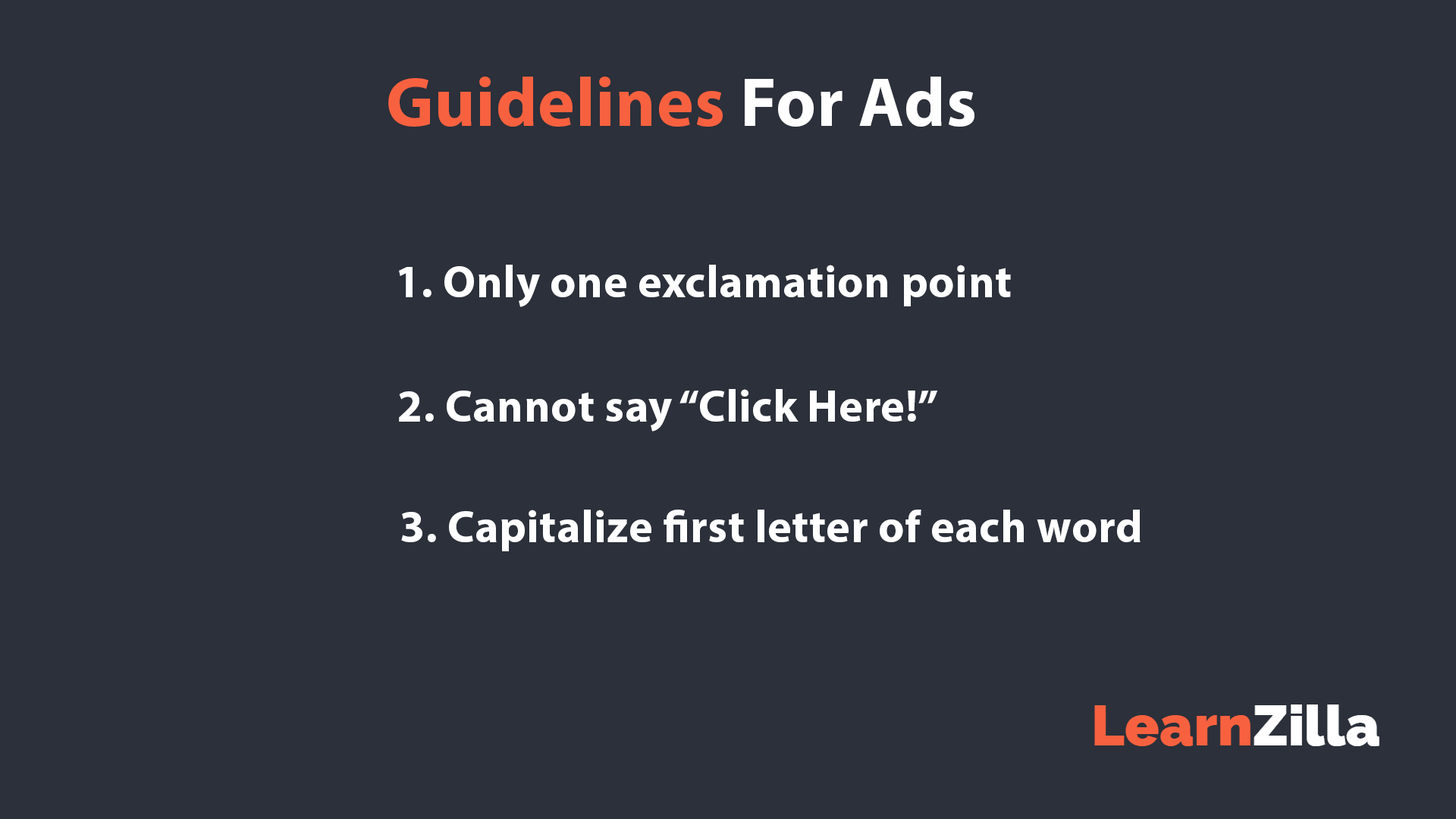
<style>
.page{position:relative;width:1456px;height:819px;background:#2b303a}
.page>*{position:absolute;margin:0}
.t1{font:69.8px "MyriadPro-Bold";letter-spacing:0.01em;color:#f8613f}
.t2{font:69.8px "MyriadPro-Bold";letter-spacing:0.01em;color:#ffffff}
.t3{font:45.5px "MyriadPro-Bold";letter-spacing:0.01em;color:#ffffff}
</style>
<div class="page">
<p class="t1" style="left:388px;top:77px;width:586px;height:50px">Guidelines<span class="t2"> For Ads</span></p>
<p class="t3" style="left:399px;top:265px;width:612px;height:42px">1. Only one exclamation point</p>
<p class="t3" style="left:399px;top:389px;width:538px;height:42px">2. Cannot say “Click Here!”</p>
<p class="t3" style="left:401px;top:510px;width:740px;height:41px">3. Capitalize first letter of each word</p>
</div>
